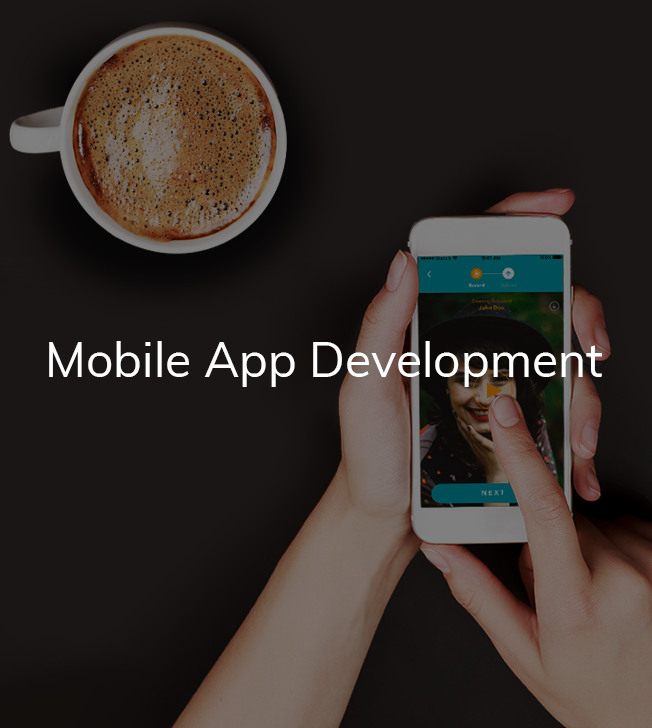
<style>
.page{position:relative;width:652px;height:728px;background:#1b1616}
.page>*{position:absolute;margin:0}
.t1{font:48px "Muli-Regular";color:#ffffff}
</style>
<div class="page">
<p class="t1" style="left:49px;top:341px;width:553px;height:46px">Mobile App Development</p>
</div>
